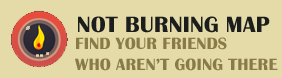
<style>
.page{position:relative;width:282px;height:78px;background:#e5dba8}
.page>*{position:absolute;margin:0}
.t1{font:23px "BritannicBold";letter-spacing:0.01em;color:#1c1e1d;text-transform:uppercase}
.t2{font:16.9px/20.5px "BritannicBold";letter-spacing:0.01em;color:#887b47;text-transform:uppercase}
</style>
<div class="page">
<p class="t1" style="left:78px;top:16px;width:192px;height:17px">Not Burning Map</p>
<p class="t2" style="left:75px;top:37px;width:203px;height:34px">find your friends <br>who aren’t going there</p>
</div>
